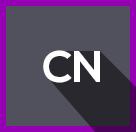
<style>
.page{position:relative;width:136px;height:132px;background:#51505d}
.page>*{position:absolute;margin:0}
.t1{font:44px "NexaBold";color:#ffffff}
</style>
<div class="page">
<p class="t1" style="left:43px;top:50px;width:57px;height:33px">CN</p>
</div>
